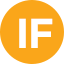
<style>
.page{position:relative;width:64px;height:64px;background:#faa61a}
.page>*{position:absolute;margin:0}
.t1{font:41.7px "Montserrat-SemiBold";letter-spacing:-0.025em;color:#ffffff}
</style>
<div class="page">
<p class="t1" style="left:19px;top:18px;width:34px;height:30px">IF</p>
</div>
